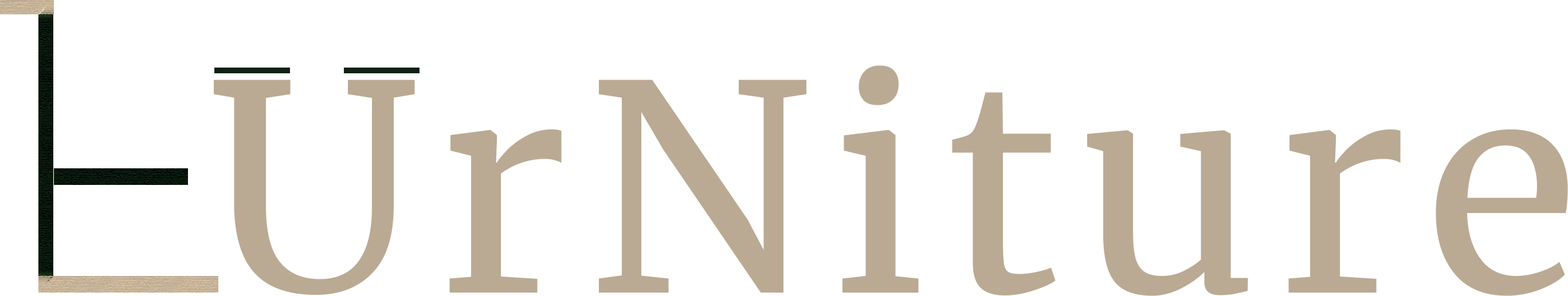
<style>
.page{position:relative;width:1568px;height:296px;background:#ffffff}
.page>*{position:absolute;margin:0}
.t1{font:286.5px "Merriweather-Regular";letter-spacing:0.06em;color:#baaa93}
</style>
<div class="page">
<p class="t1" style="left:214px;top:65px;width:1354px;height:231px">UrNiture</p>
</div>
